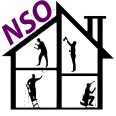
<style>
.page{position:relative;width:116px;height:116px;background:#ffffff}
.page>*{position:absolute;margin:0}
.t1{font:30px "MyriadPro-BoldIt";color:#660066}
</style>
<div class="page">
<p class="t1" style="left:1px;top:0px;width:51px;height:46px;rotate:-36deg">NSO</p>
</div>
